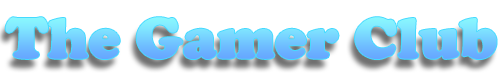
<style>
.page{position:relative;width:500px;height:80px;background:#ffffff}
.page>*{position:absolute;margin:0}
.t1{font:60px "CooperBlack"}
</style>
<div class="page">
<p class="t1" style="left:5px;top:17px;width:492px;height:42px">The Gamer Club</p>
</div>
